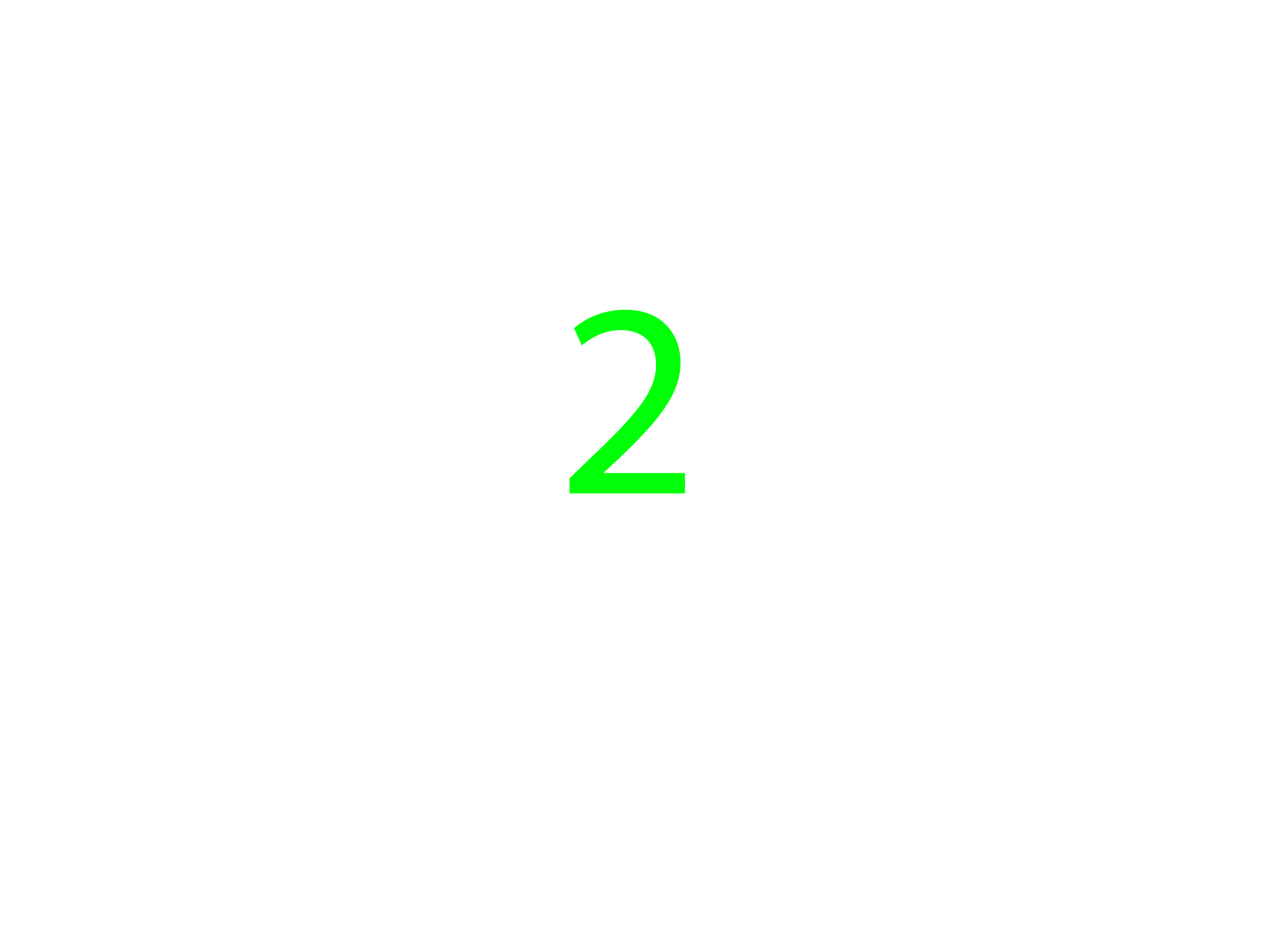
<style>
.page{position:relative;width:1261px;height:946px;background:#ffffff}
.page>*{position:absolute;margin:0}
.t1{font:278px "MyriadPro-Regular";color:#00ff08}
</style>
<div class="page">
<p class="t1" style="left:569px;top:310px;width:116px;height:184px">2</p>
</div>
